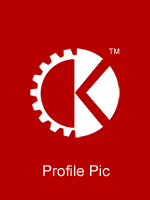
<style>
.page{position:relative;width:150px;height:200px;background:#b70000}
.page>*{position:absolute;margin:0}
.t1{font:7.5px "ArialMT";color:#ffffff}
.t2{font:15px "ArialMT";color:#ffffff}
</style>
<div class="page">
<p class="t1" style="left:109px;top:48px;width:11px;height:6px">TM</p>
<p class="t2" style="left:43px;top:165px;width:67px;height:12px">Profile Pic</p>
</div>
